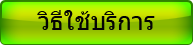
<style>
.page{position:relative;width:193px;height:45px}
.page>*{position:absolute;margin:0}
.t1{font:25px "Tahoma";color:#040404}
</style>
<div class="page">
<p class="t1" style="left:37px;top:10px;width:118px;height:20px">วิธีใช้บริการ</p>
</div>
